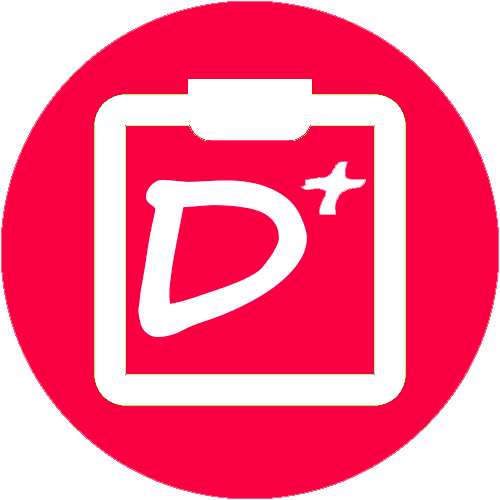
<style>
.page{position:relative;width:500px;height:500px;background:#fa0042}
.page>*{position:absolute;margin:0}
.t1{font:233.3px "SegoeScript-Bold";color:#ffffff}
</style>
<div class="page">
<p class="t1" style="left:138px;top:180px;width:169px;height:157px">D</p>
</div>
